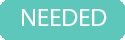
<style>
.page{position:relative;width:125px;height:40px;background:#5ec7bc}
.page>*{position:absolute;margin:0}
.t1{font:25px "MyriadPro-Regular";color:#ffffff}
</style>
<div class="page">
<p class="t1" style="left:22px;top:9px;width:85px;height:17px">NEEDED</p>
</div>
